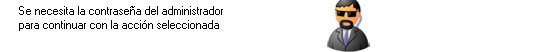
<style>
.page{position:relative;width:552px;height:52px;background:#ffffff}
.page>*{position:absolute;margin:0}
.t1{font:11.4px "MS Sans Serif";color:#000000}
</style>
<div class="page">
<p class="t1" style="left:19px;top:6px;width:204px;height:25px">Se necesita la contraseña del administrador<br>para continuar con la acción seleccionada</p>
</div>
